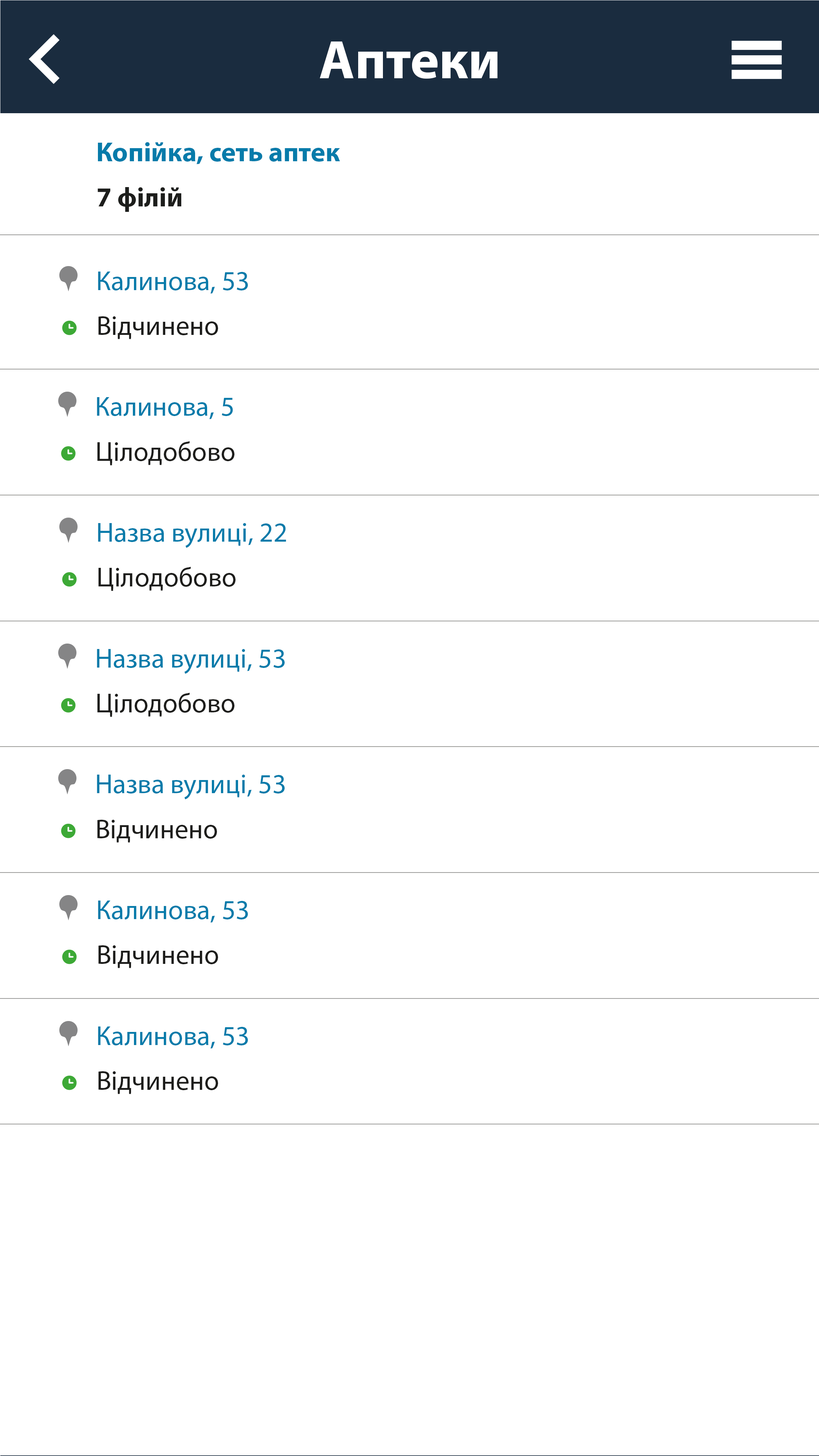
<style>
.page{position:relative;width:819px;height:1456px;background:#ffffff}
.page>*{position:absolute;margin:0}
.t1{font:54.6px "MyriadPro-Bold";color:#ffffff}
.t2{font:27.3px "MyriadPro-Bold";color:#077baa}
.t3{font:27.3px "MyriadPro-Bold";color:#1d1e1c}
.t4{font:27.3px "MyriadPro-Regular";color:#077baa}
.t5{font:27.3px "MyriadPro-Regular";color:#1d1d1b}
</style>
<div class="page">
<p class="t1" style="left:320px;top:41px;width:178px;height:38px">Аптеки</p>
<p class="t2" style="left:98px;top:142px;width:242px;height:22px">Копійка, сеть аптек</p>
<p class="t3" style="left:98px;top:187px;width:83px;height:25px">7 філій</p>
<p class="t4" style="left:98px;top:272px;width:150px;height:22px">Калинова, 53</p>
<p class="t5" style="left:98px;top:316px;width:120px;height:23px">Відчинено</p>
<p class="t4" style="left:97px;top:397px;width:136px;height:22px">Калинова, 5</p>
<p class="t5" style="left:97px;top:441px;width:137px;height:25px">Цілодобово</p>
<p class="t4" style="left:98px;top:523px;width:188px;height:25px">Назва вулиці, 22</p>
<p class="t5" style="left:98px;top:567px;width:138px;height:24px">Цілодобово</p>
<p class="t4" style="left:97px;top:649px;width:188px;height:25px">Назва вулиці, 53</p>
<p class="t5" style="left:97px;top:693px;width:137px;height:24px">Цілодобово</p>
<p class="t4" style="left:97px;top:775px;width:188px;height:24px">Назва вулиці, 53</p>
<p class="t5" style="left:97px;top:820px;width:120px;height:23px">Відчинено</p>
<p class="t4" style="left:98px;top:901px;width:150px;height:22px">Калинова, 53</p>
<p class="t5" style="left:98px;top:945px;width:120px;height:23px">Відчинено</p>
<p class="t4" style="left:98px;top:1026px;width:150px;height:23px">Калинова, 53</p>
<p class="t5" style="left:98px;top:1071px;width:120px;height:23px">Відчинено</p>
</div>
